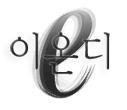
<style>
.page{position:relative;width:127px;height:110px;background:#ffffff}
.page>*{position:absolute;margin:0}
.t1{font:44px "YDIYMjO220";color:#2e2e2e;scale:0.9 1}
</style>
<div class="page">
<p class="t1" style="left:10px;top:32px;width:100px;height:43px">이온디</p>
</div>
